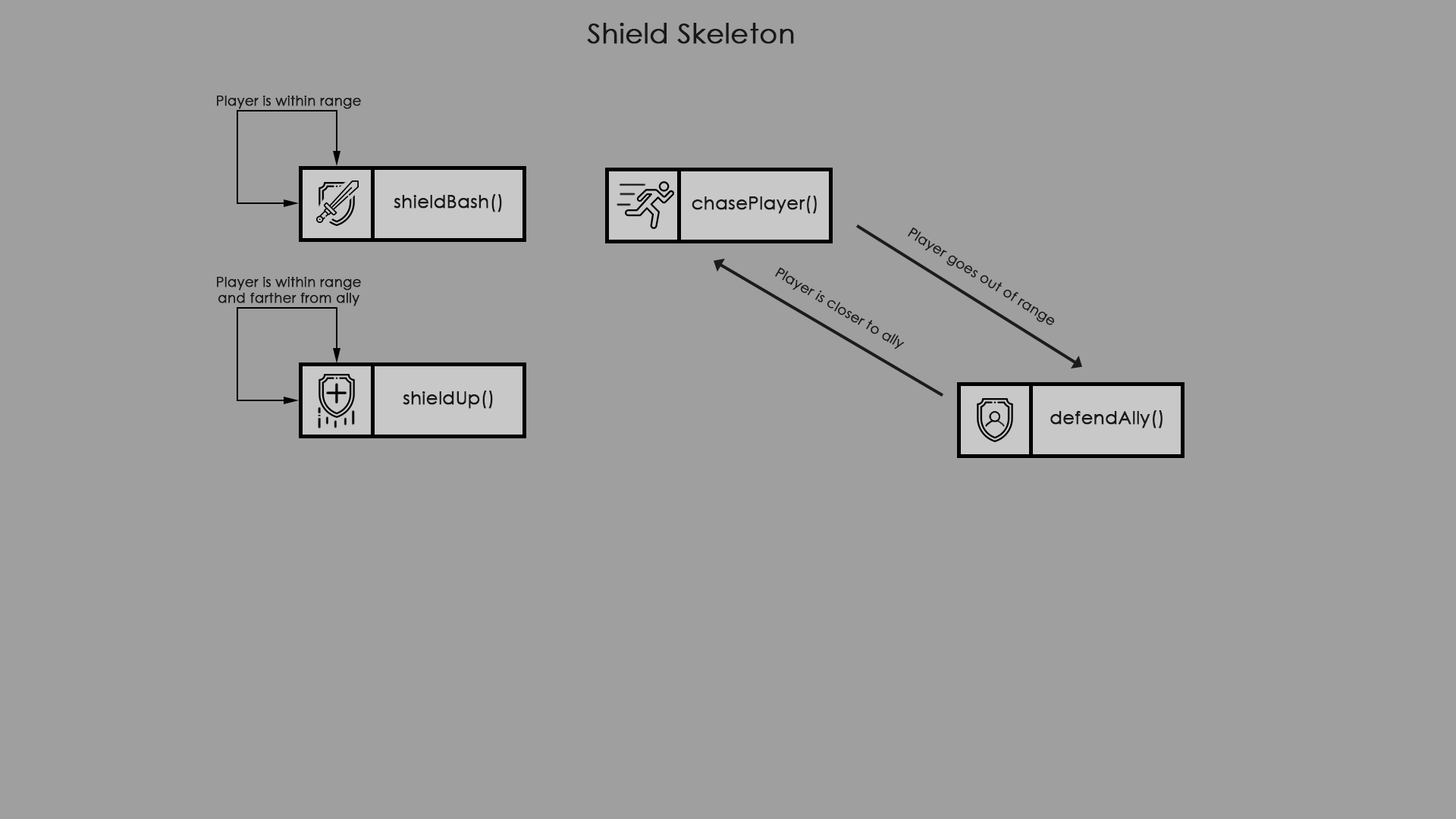
<style>
.page{position:relative;width:1456px;height:819px;background:#9f9f9f}
.page>*{position:absolute;margin:0}
.t1{font:27.3px "CenturyGothic";color:#181818;font-weight:bold}
.t2{font:13.6px "CenturyGothic";color:#181818;font-weight:bold}
.t3{font:18.2px "CenturyGothic";color:#181818;font-weight:bold}
</style>
<div class="page">
<p class="t1" style="left:587px;top:23px;width:207px;height:21px">Shield Skeleton</p>
<p class="t2" style="left:217px;top:96px;width:144px;height:13px">Player is within range</p>
<p class="t3" style="left:394px;top:194px;width:108px;height:18px">shieldBash()</p>
<p class="t3" style="left:692px;top:196px;width:125px;height:18px">chasePlayer()</p>
<p class="t2" style="left:908px;top:227px;width:147px;height:98px;rotate:32deg">Player goes out of range</p>
<p class="t2" style="left:775px;top:267px;width:130px;height:83px;rotate:30deg">Player is closer to ally</p>
<p class="t2" style="left:217px;top:277px;width:144px;height:29px;text-align:center">Player is within range and farther from ally</p>
<p class="t3" style="left:403px;top:391px;width:90px;height:18px">shieldUp()</p>
<p class="t3" style="left:1050px;top:410px;width:113px;height:18px">defendAlly()</p>
</div>
